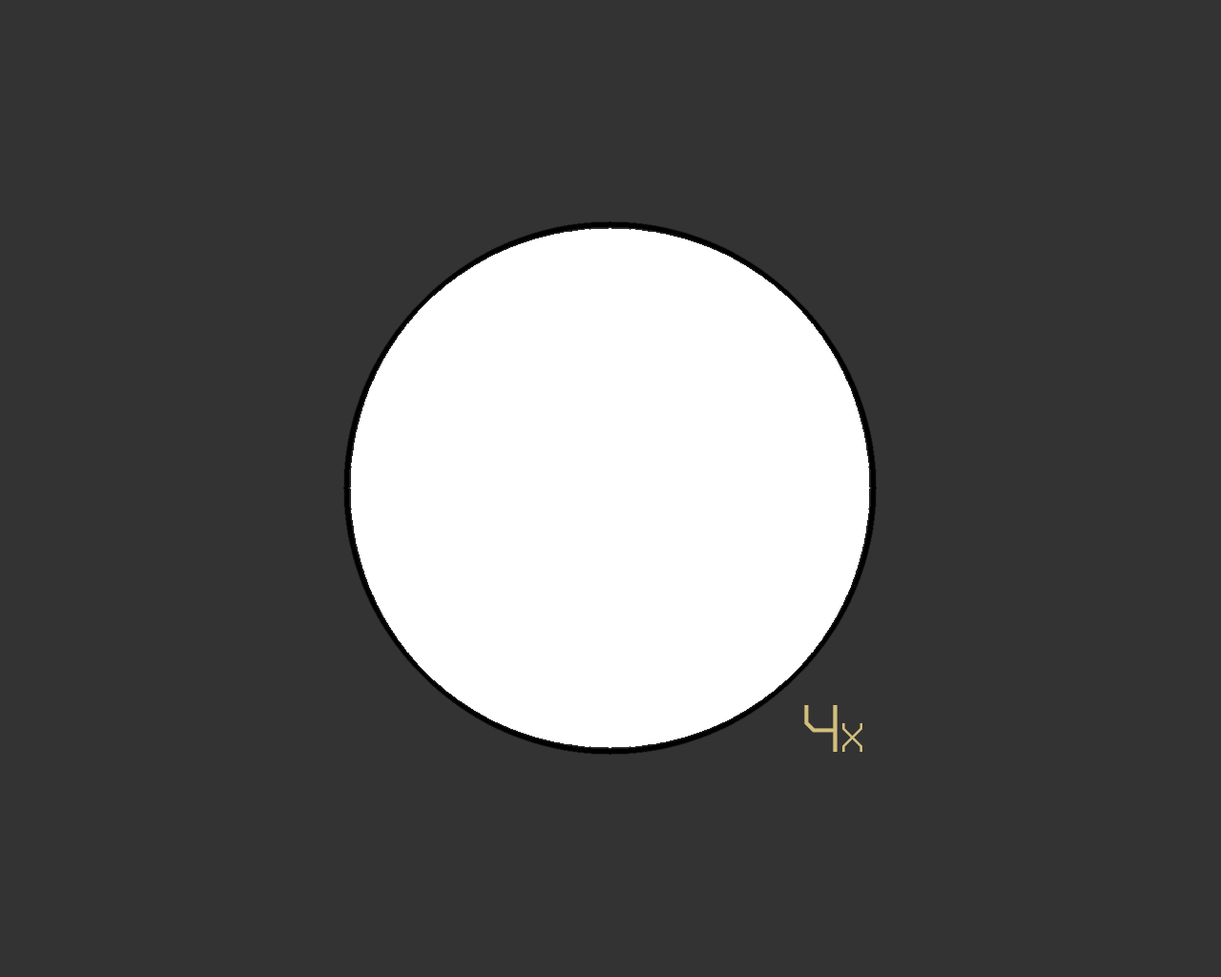
<style>
.page{position:relative;width:1221px;height:977px;background:#333333}
.page>*{position:absolute;margin:0}
.t1{font:66.8px "Arame-Thin";color:#d2bf7a}
.t2{font:41px "Arame-Thin";color:#d2bf7a}
</style>
<div class="page">
<p class="t1" style="left:804px;top:705px;width:58px;height:47px">4<span class="t2">x</span></p>
</div>
